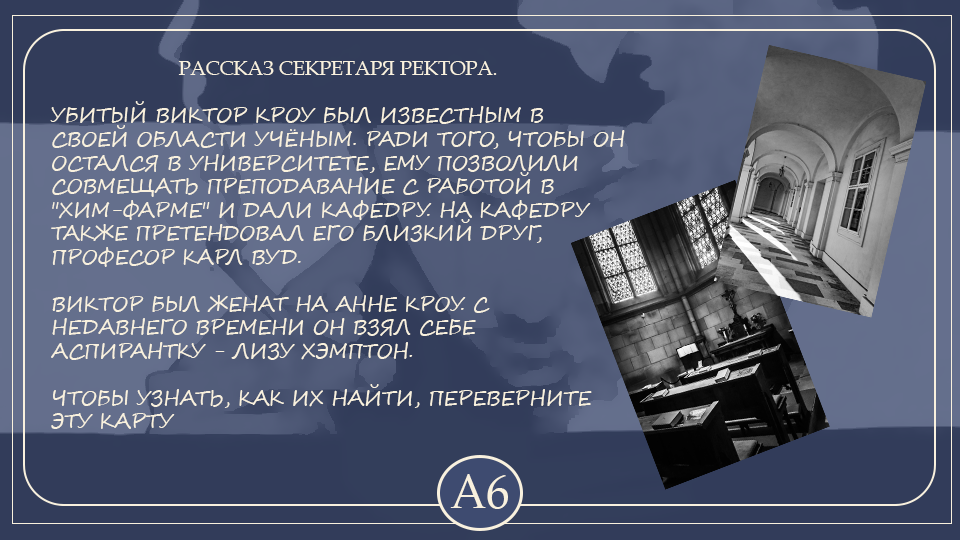
<style>
.page{position:relative;width:960px;height:540px;background:#323c5a}
.page>*{position:absolute;margin:0}
.t1{font:19.6px "SegoeScript";color:#f9f1de;text-transform:uppercase}
.t2{font:19.6px "BookAntiqua";color:#f9f1de;text-transform:uppercase}
.t3{font:46.6px "BookAntiqua";color:#f9f1de}
</style>
<div class="page">
<p class="t1" style="left:50px;top:61px;width:575px;height:368px;text-align:center"><span class="t2">Рассказ секретаря ректора.<br><br></span>Убитый Виктор Кроу был известным в своей области учёным. Ради того, чтобы он остался в Университете, ему позволили совмещать преподавание с работой в "Хим-Фарме" и дали кафедру. На кафедру также претендовал его близкий друг, професор Карл Вуд.<br><br>Виктор был женат на Анне Кроу. С недавнего времени он взял себе аспирантку - Лизу Хэмптон.<br><br>Чтобы узнать, как их найти, переверните эту карту</p>
<p class="t3" style="left:450px;top:474px;width:58px;height:35px">A6</p>
</div>
